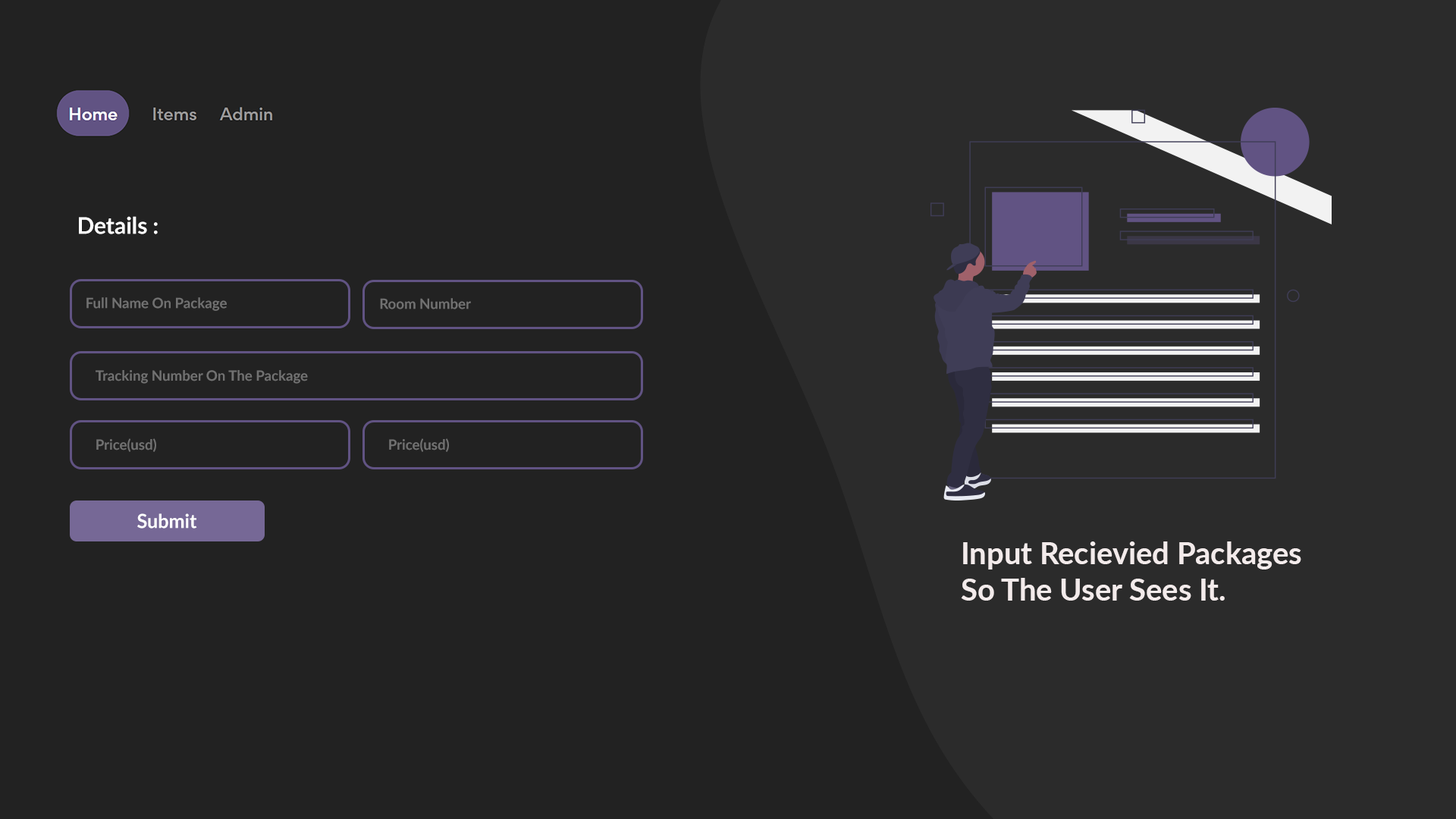
<style>
.page{position:relative;width:1456px;height:819px;background:#222222}
.page>*{position:absolute;margin:0}
.t1{font:22.7px "Lato-Bold";color:#ffffff}
.t2{font:14.1px "Lato-Bold";color:#717171}
.t3{font:19.1px "Lato-Bold";color:#ffffff}
.t4{font:30.3px "Lato-Bold";color:#f3ebeb}
</style>
<div class="page">
<p class="t1" style="left:79px;top:216px;width:79px;height:18px">Details :</p>
<p class="t2" style="left:86px;top:297px;width:141px;height:14px">Full Name On Package</p>
<p class="t2" style="left:380px;top:298px;width:91px;height:11px">Room Number</p>
<p class="t2" style="left:96px;top:370px;width:212px;height:14px">Tracking Number On The Package</p>
<p class="t2" style="left:96px;top:438px;width:60px;height:14px">Price(usd)</p>
<p class="t2" style="left:389px;top:438px;width:60px;height:14px">Price(usd)</p>
<p class="t3" style="left:137px;top:513px;width:60px;height:16px">Submit</p>
<p class="t4" style="left:961px;top:541px;width:340px;height:60px">Input Recievied Packages<br>So The User Sees It.</p>
</div>
